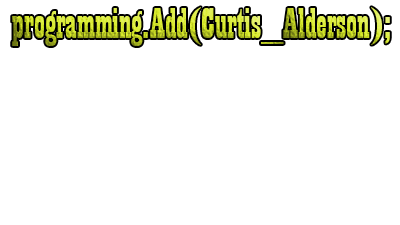
<style>
.page{position:relative;width:400px;height:225px;background:#ffffff}
.page>*{position:absolute;margin:0}
.t1{font:10.7px "Playbill"}
</style>
<div class="page">
<p class="t1" style="left:12px;top:7px;width:378px;height:39px">programming.Add(Curtis_Alderson);</p>
</div>
